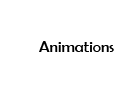
<style>
.page{position:relative;width:126px;height:95px;background:#ffffff}
.page>*{position:absolute;margin:0}
.t1{font:16px "BerlinSansFB-Reg";color:#000000}
</style>
<div class="page">
<p class="t1" style="left:39px;top:41px;width:75px;height:11px">Animations</p>
</div>
